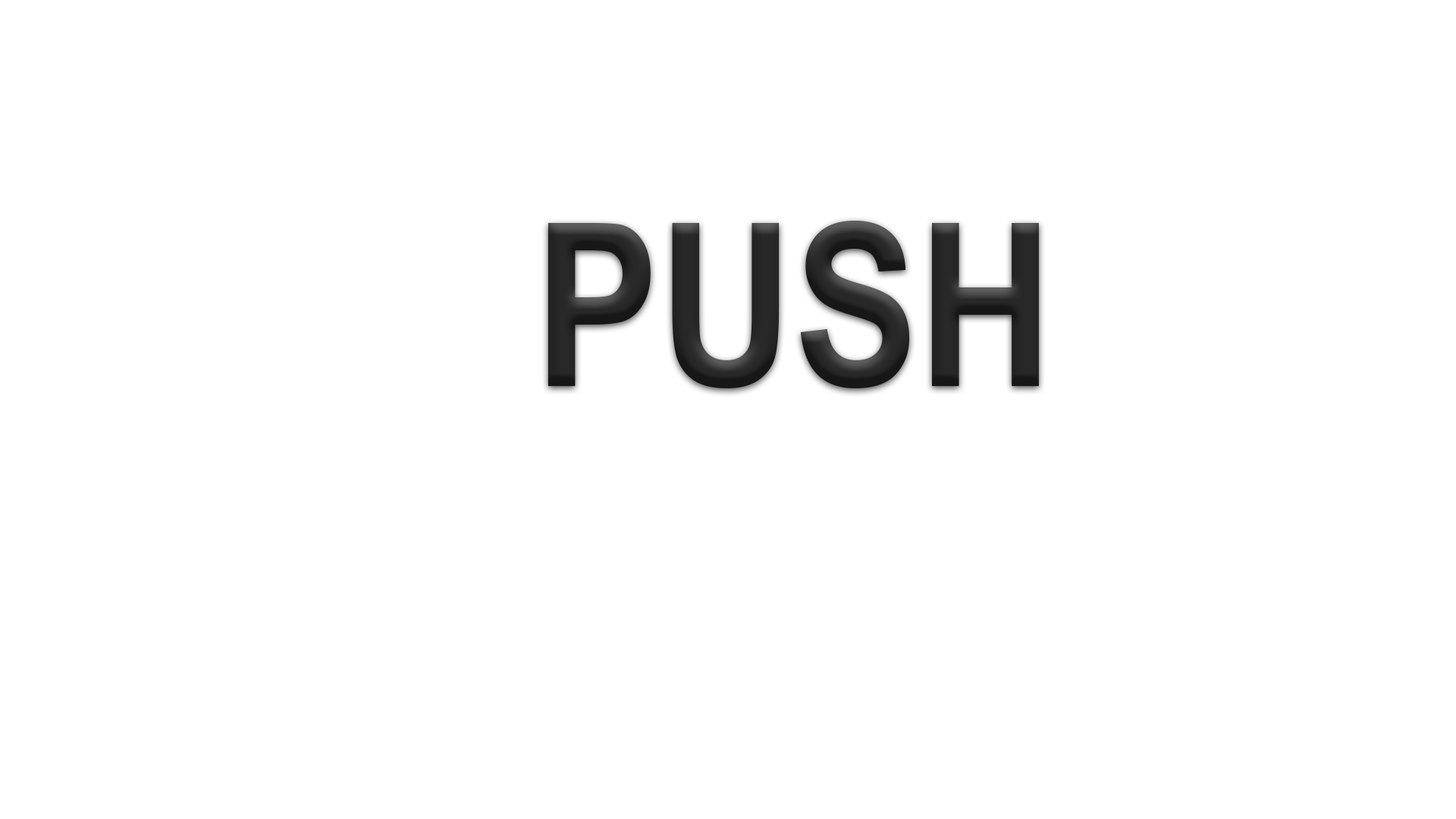
<style>
.page{position:relative;width:1456px;height:819px;background:#ffffff}
.page>*{position:absolute;margin:0}
.t1{font:227.5px "ArialNarrow-Bold";color:#282828}
</style>
<div class="page">
<p class="t1" style="left:548px;top:221px;width:491px;height:167px">PUSH</p>
</div>
